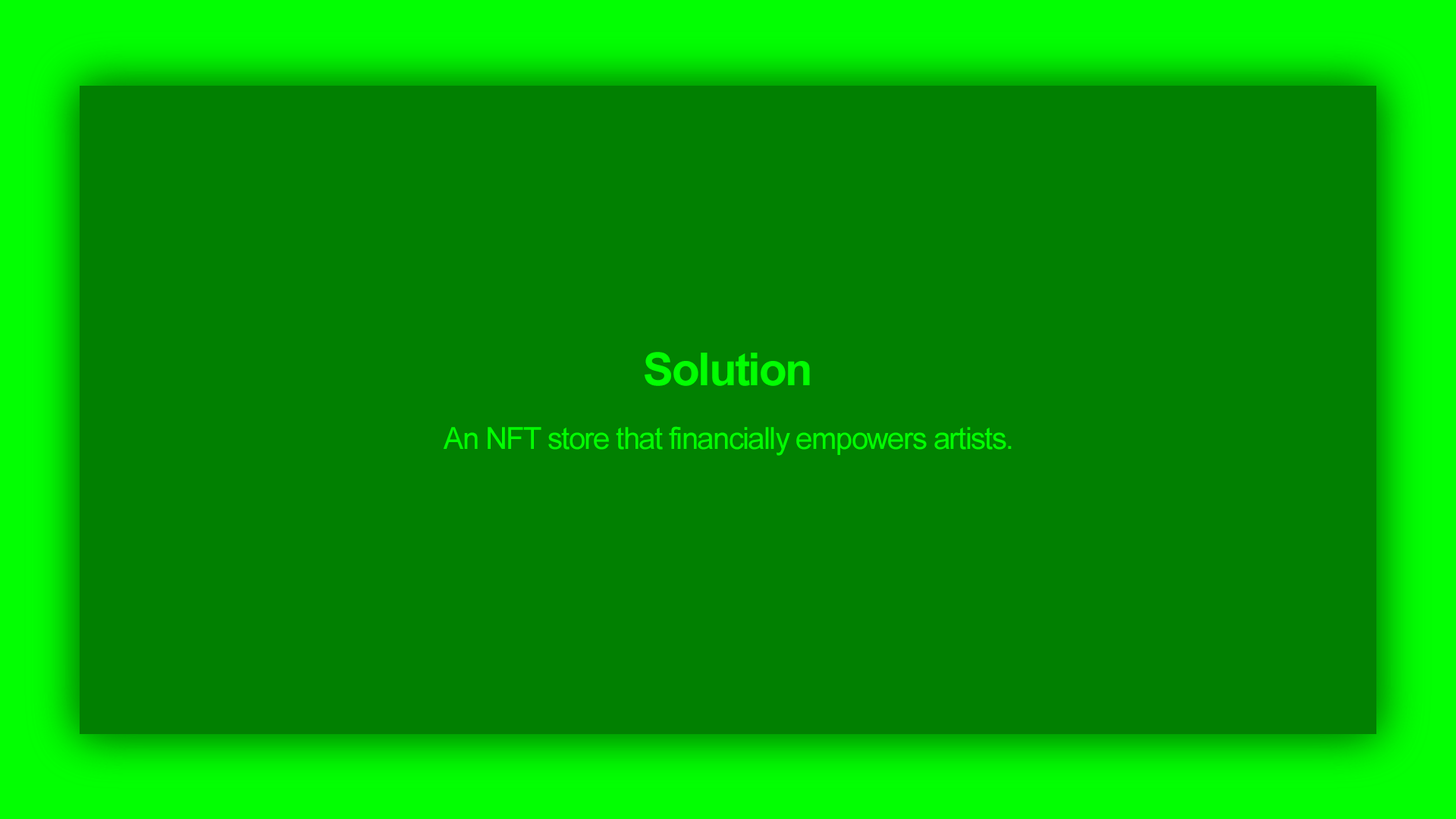
<style>
.page{position:relative;width:1456px;height:819px;background:#018001}
.page>*{position:absolute;margin:0}
.t1{font:45.5px "Arial-BoldMT";letter-spacing:-0.04em;color:#02ff02}
.t2{font:30.3px "ArialMT";letter-spacing:-0.04em;color:#02ff02}
</style>
<div class="page">
<p class="t1" style="left:645px;top:352px;width:165px;height:34px">Solution</p>
<p class="t2" style="left:443px;top:426px;width:569px;height:30px">An NFT store that financially empowers artists.</p>
</div>
